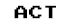
<style>
.page{position:relative;width:72px;height:24px;background:#ffffff}
.page>*{position:absolute;margin:0}
.t1{font:14px "PressStart2P-Regular";letter-spacing:0.04em;color:#000000}
</style>
<div class="page">
<p class="t1" style="left:14px;top:5px;width:42px;height:14px">ACT</p>
</div>
